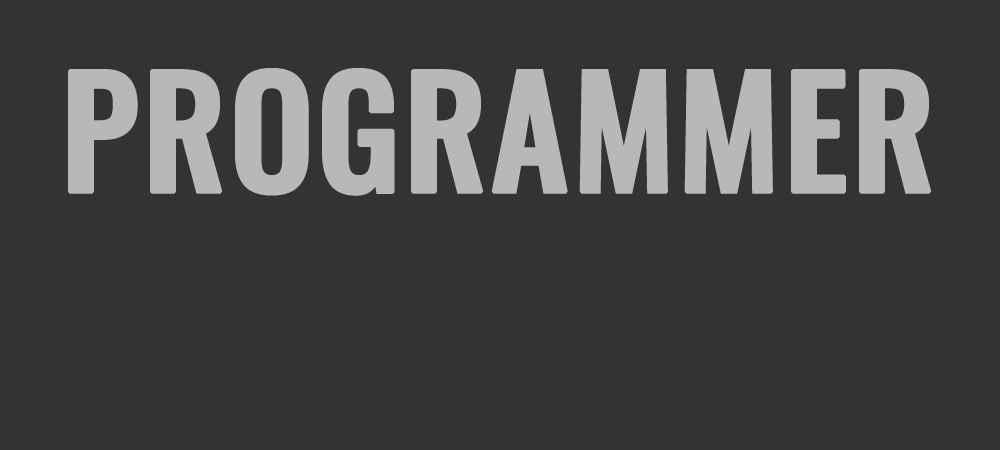
<style>
.page{position:relative;width:1000px;height:450px;background:#333333}
.page>*{position:absolute;margin:0}
.t1{font:213px "Oswald-Medium";color:#b8b8b8;font-variant:small-caps;font-weight:bold}
</style>
<div class="page">
<p class="t1" style="left:68px;top:68px;width:864px;height:128px">programmer</p>
</div>
